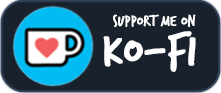
<style>
.page{position:relative;width:221px;height:93px;background:#19222c}
.page>*{position:absolute;margin:0}
.t1{font:15.8px/38px "TrashHand";color:#ffffff;font-weight:bold;scale:1.03 1}
.t2{font:47.3px/38px "TrashHand";color:#ffffff;font-weight:bold;scale:1.03 1}
</style>
<div class="page">
<p class="t1" style="left:103px;top:14px;width:93px;height:58px;text-align:center">Support me on<br><span class="t2">Ko-fi</span></p>
</div>
